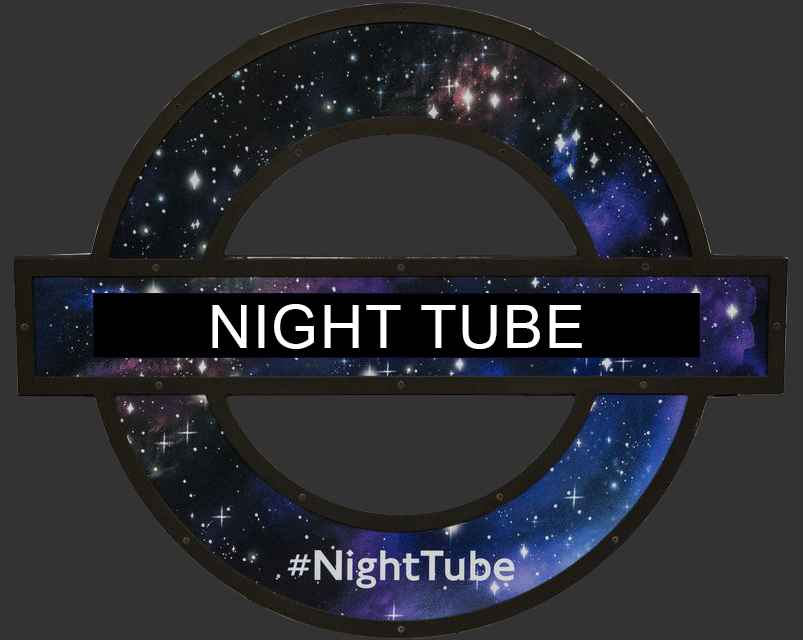
<style>
.page{position:relative;width:803px;height:640px;background:#333333}
.page>*{position:absolute;margin:0}
.t1{font:60px "ArialMT";letter-spacing:0.03em;color:#ffffff}
</style>
<div class="page">
<p class="t1" style="left:212px;top:304px;width:370px;height:45px">NIGHT TUBE</p>
</div>
